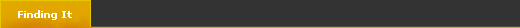
<style>
.page{position:relative;width:520px;height:28px;background:#333333}
.page>*{position:absolute;margin:0}
.t1{font:10px "Verdana-Bold";color:#ffffff}
</style>
<div class="page">
<p class="t1" style="left:18px;top:10px;width:54px;height:10px">Finding It</p>
</div>
